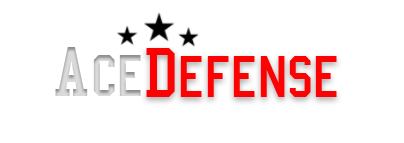
<style>
.page{position:relative;width:404px;height:143px;background:#ffffff}
.page>*{position:absolute;margin:0}
.t1{font:60px "CollegeSemiCondensed";color:#dadada}
.t2{font:72px "CollegeSemiCondensed";color:#dadada}
.t3{font:60px "CollegeSemiCondensed";color:#fc0202}
.t4{font:72px "CollegeSemiCondensed";color:#fc0202}
</style>
<div class="page">
<p class="t1" style="left:55px;top:47px;width:86px;height:49px"><span class="t2">A</span>ce</p>
<p class="t3" style="left:146px;top:48px;width:191px;height:49px"><span class="t4">D</span>efense</p>
</div>
